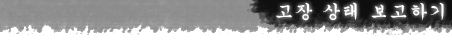
<style>
.page{position:relative;width:452px;height:50px;background:#ffffff}
.page>*{position:absolute;margin:0}
.t1{font:18px "Gungsuh";letter-spacing:0.1em;color:#ffffff}
</style>
<div class="page">
<p class="t1" style="left:276px;top:2px;width:168px;height:19px">고장 상태 보고하기</p>
</div>
